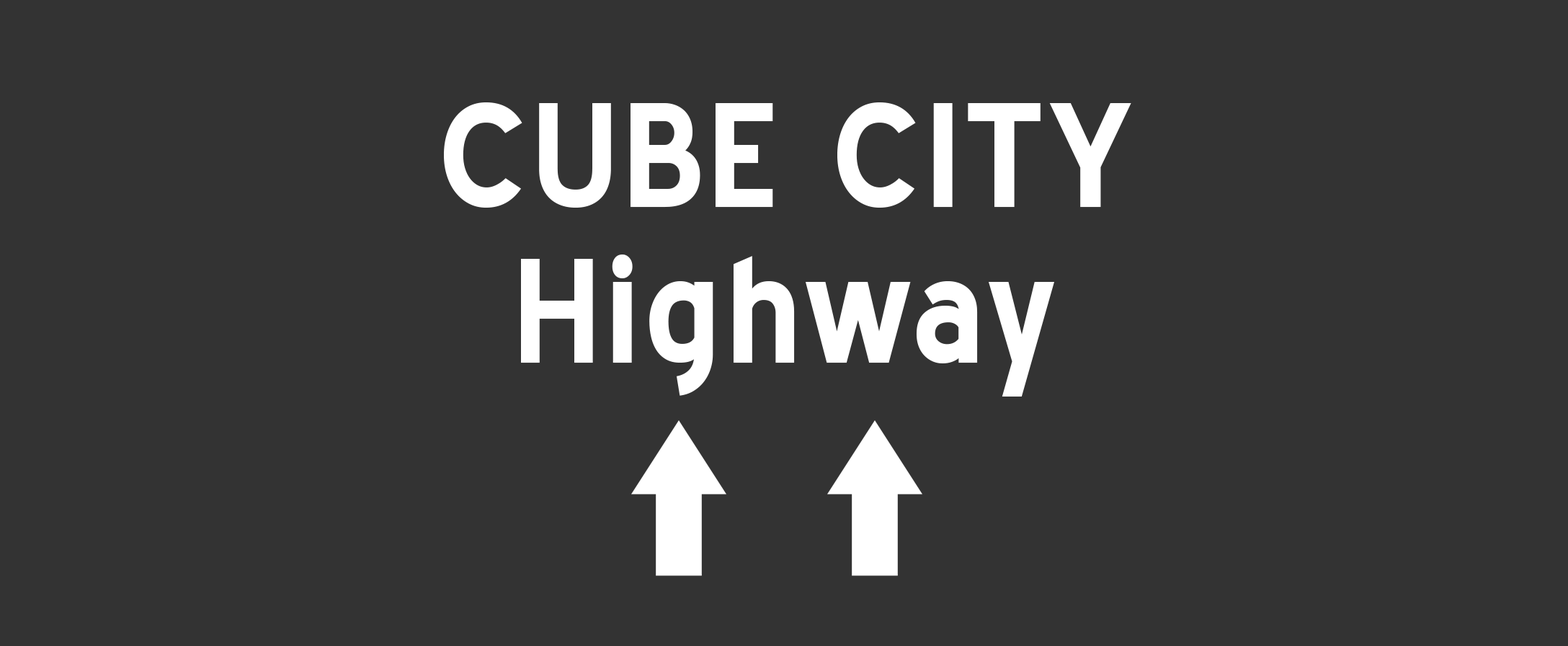
<style>
.page{position:relative;width:1568px;height:646px;background:#333333}
.page>*{position:absolute;margin:0}
.t1{font:144.1px "BlueHighway-Bold";letter-spacing:0.02em;color:#ffffff}
</style>
<div class="page">
<p class="t1" style="left:444px;top:102px;width:687px;height:106px">CUBE CITY</p>
<p class="t1" style="left:521px;top:254px;width:533px;height:142px">Highway</p>
</div>
